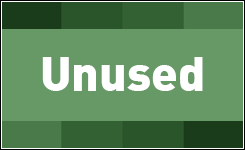
<style>
.page{position:relative;width:245px;height:150px;background:#669965}
.page>*{position:absolute;margin:0}
.t1{font:48px "DIN-Black";color:#ffffff}
</style>
<div class="page">
<p class="t1" style="left:42px;top:57px;width:161px;height:34px">Unused</p>
</div>
